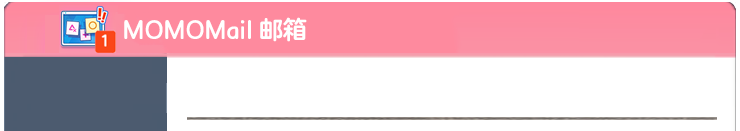
<style>
.page{position:relative;width:740px;height:131px;background:#ffffff}
.page>*{position:absolute;margin:0}
.t1{font:24px "FZLANTY_CUJW--GB1-0";color:#ffffff}
</style>
<div class="page">
<p class="t1" style="left:124px;top:17px;width:183px;height:25px">MOMOMail 邮箱</p>
</div>
